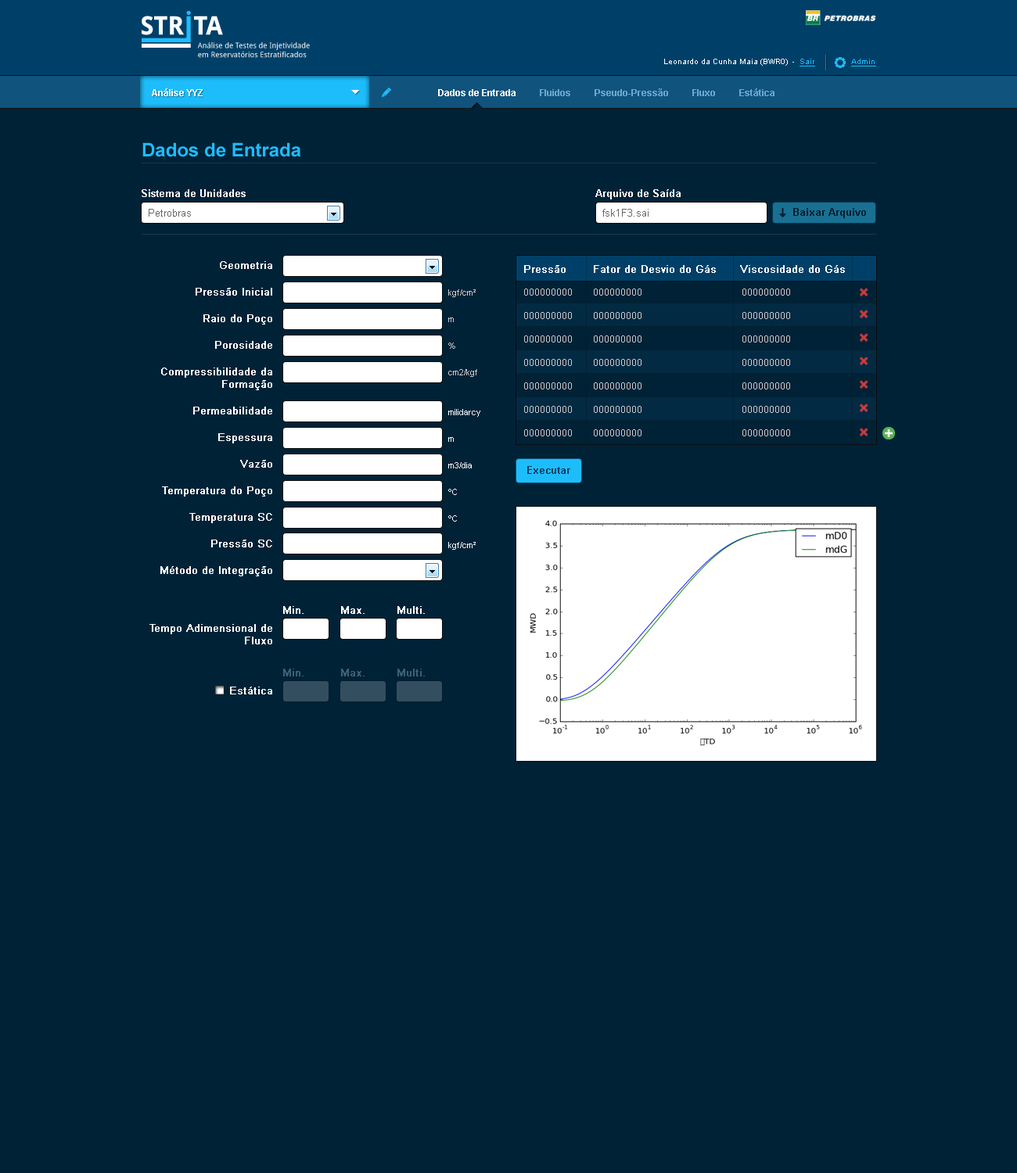
<style>
.page{position:relative;width:1017px;height:1173px;background:#002237}
.page>*{position:absolute;margin:0}
.t1{font:7.8px "ArialMT";color:#ffffff}
.t2{font:7.8px "ArialMT";color:#1dbdfc;text-decoration:underline}
.t3{font:9.4px "Arial-BoldMT";color:#ffffff}
.t4{font:9.4px "Arial-BoldMT";color:#6ba8ce}
.t5{font:18.8px "Arial-BoldMT";color:#1dbdfc}
.t6{font:10.2px "Arial-BoldMT";color:#ffffff}
.t7{font:10.2px "ArialMT";color:#666666}
.t8{font:10.2px "Arial-BoldMT";color:#011f31}
.t9{font:10.2px/26.6px "ArialMT";color:#ffffff;font-weight:bold}
.t10{font:10.2px/12.5px "ArialMT";color:#ffffff;font-weight:bold}
.t11{font:10.2px "ArialMT";color:#ffffff;font-weight:bold}
.t12{font:8.6px/26.6px "ArialMT";color:#cccccc}
.t13{font:9.4px/11.7px "ArialMT";color:#cccccc}
.t14{font:8.6px/26.6px "ArialMT";color:#fffefe}
.t15{font:10.2px "Arial-BoldMT";color:#004068}
.t16{font:10.2px "ArialMT";color:#3e6076;font-weight:bold}
.t17{font:10.2px "ArialMT";color:#3d6075;font-weight:bold}
</style>
<div class="page">
<p class="t1" style="left:664px;top:59px;width:151px;height:7px">Leonardo da Cunha Maia (BWR0)  -  <span class="t2">Sair</span></p>
<p class="t2" style="left:851px;top:59px;width:25px;height:7px">Admin</p>
<p class="t3" style="left:152px;top:88px;width:51px;height:8px">Análise YYZ</p>
<p class="t4" style="left:438px;top:88px;width:336px;height:8px"><span class="t3">Dados de Entrada          </span>Fluidos          Pseudo-Pressão          Fluxo          Estática</p>
<p class="t5" style="left:142px;top:142px;width:159px;height:15px">Dados de Entrada</p>
<p class="t6" style="left:142px;top:189px;width:104px;height:8px">Sistema de Unidades</p>
<p class="t6" style="left:595px;top:189px;width:85px;height:10px">Arquivo de Saída</p>
<p class="t7" style="left:149px;top:209px;width:42px;height:8px">Petrobras</p>
<p class="t7" style="left:602px;top:209px;width:46px;height:8px">fsk1F3.sai</p>
<p class="t8" style="left:793px;top:208px;width:73px;height:10px">Baixar Arquivo</p>
<p class="t9" style="left:160px;top:261px;width:112px;height:315px;text-align:right">Geometria<br>Pressão Inicial<br>Raio do Poço<br>Porosidade<br>Compressibili<span class="t10">dade da<br>Formação<br></span>Permeabilidade<br>Espessura<br>Vazão<br>Temperatura do Poço<br>Temperatura SC<br>Pressão SC<br>Método de Integração</p>
<p class="t11" style="left:524px;top:265px;width:41px;height:8px">Pressão</p>
<p class="t11" style="left:594px;top:265px;width:122px;height:8px">Fator de Desvio do Gás</p>
<p class="t11" style="left:740px;top:265px;width:105px;height:8px">Viscosidade do Gás</p>
<p class="t12" style="left:448px;top:289px;width:29px;height:88px">kgf/cm²<br>m<br>%<br>cm2/kgf</p>
<p class="t13" style="left:524px;top:289px;width:48px;height:147px">000000000<br><br>000000000<br><br>000000000<br><br>000000000<br><br>000000000<br><br>000000000<br><br>000000000</p>
<p class="t13" style="left:594px;top:289px;width:47px;height:147px">000000000<br><br>000000000<br><br>000000000<br><br>000000000<br><br>000000000<br><br>000000000<br><br>000000000</p>
<p class="t13" style="left:742px;top:289px;width:48px;height:147px">000000000<br><br>000000000<br><br>000000000<br><br>000000000<br><br>000000000<br><br>000000000<br><br>000000000</p>
<p class="t14" style="left:448px;top:409px;width:32px;height:141px">milidarcy<br>m<br>m3/dia<br>ºC<br>ºC<br>kgf/cm²</p>
<p class="t15" style="left:527px;top:466px;width:43px;height:8px">Executar</p>
<p class="t11" style="left:283px;top:606px;width:20px;height:8px">Min.</p>
<p class="t11" style="left:341px;top:606px;width:23px;height:8px">Max.</p>
<p class="t11" style="left:397px;top:606px;width:28px;height:8px">Multi.</p>
<p class="t10" style="left:149px;top:624px;width:123px;height:70px;text-align:right">Tempo Adimensional de Fluxo<br><br><br><br>Estática</p>
<p class="t16" style="left:283px;top:669px;width:20px;height:7px">Min.</p>
<p class="t17" style="left:341px;top:669px;width:23px;height:7px">Max.</p>
<p class="t17" style="left:397px;top:669px;width:28px;height:7px">Multi.</p>
</div>
